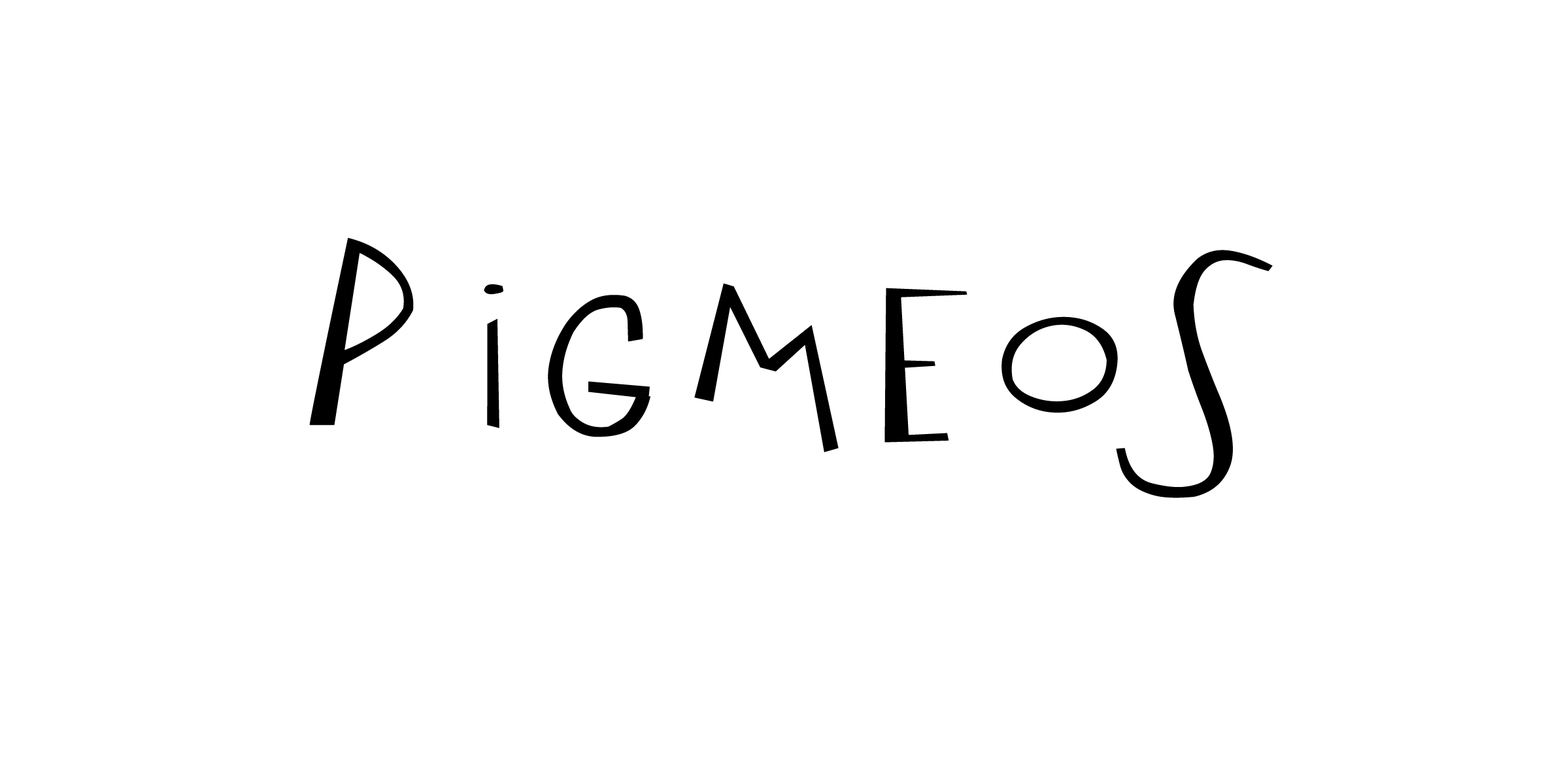
<style>
.page{position:relative;width:1544px;height:772px;background:#ffffff}
.page>*{position:absolute;margin:0}
.t1{font:229.6px "Big-Fish-Ensemble-Regular";letter-spacing:0.1em;color:#000000;scale:1.33 1}
.t2{font:306.2px "Big-Fish-Ensemble-Regular";letter-spacing:0.1em;color:#000000;scale:1.33 1}
</style>
<div class="page">
<p class="t1" style="left:309px;top:238px;width:964px;height:260px"><span class="t2">P</span>ICMEOS</p>
</div>
